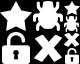
<style>
.page{position:relative;width:80px;height:64px;background:#000000}
.page>*{position:absolute;margin:0}
.t1{font:32px "Toonish";color:#ffffff;font-weight:bold;scale:1.26 1}
.t2{font:16px "Toonish";color:#ffffff;font-weight:bold;scale:1.37 1}
</style>
<div class="page">
<p class="t1" style="left:34px;top:35px;width:28px;height:27px">X</p>
<p class="t2" style="left:64px;top:33px;width:16px;height:14px">X</p>
</div>
